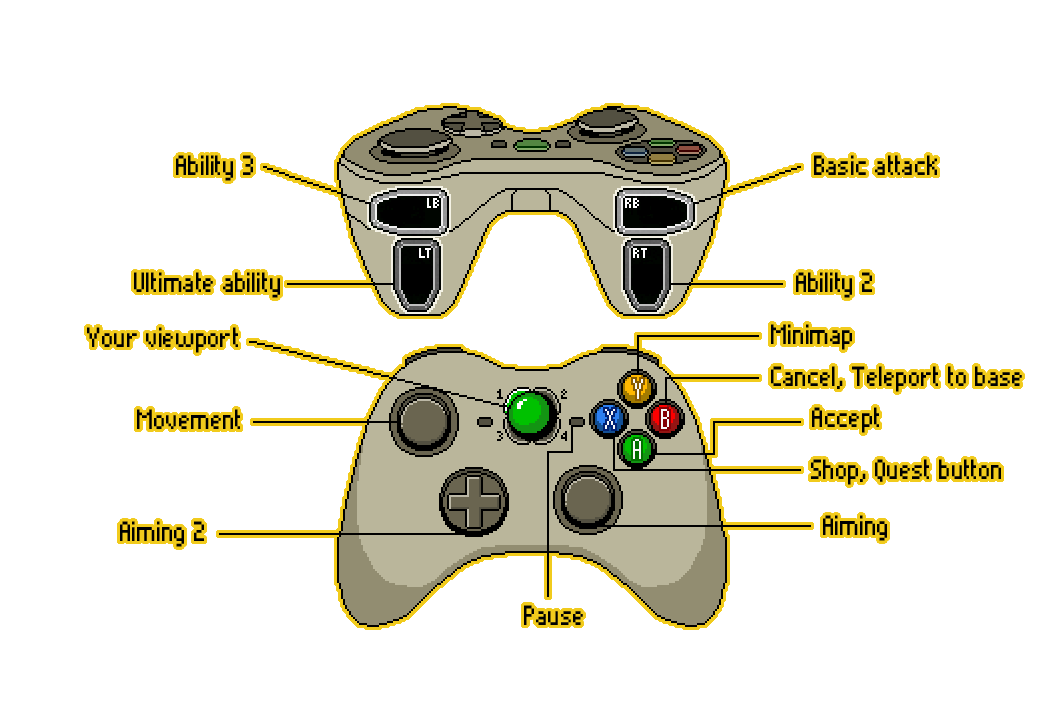
<style>
.page{position:relative;width:1063px;height:710px;background:#ffffff}
.page>*{position:absolute;margin:0}
.t1{font:36px "Pixelade";color:#000000;scale:0.89 1}
</style>
<div class="page">
<p class="t1" style="left:176px;top:155px;width:77px;height:26px">Ability 3</p>
<p class="t1" style="left:814px;top:155px;width:123px;height:20px">Basic attack</p>
<p class="t1" style="left:134px;top:272px;width:146px;height:26px">Ultimate ability</p>
<p class="t1" style="left:796px;top:272px;width:76px;height:26px">Ability 2</p>
<p class="t1" style="left:87px;top:327px;width:151px;height:26px">Your viewport</p>
<p class="t1" style="left:771px;top:324px;width:81px;height:26px">Minimap</p>
<p class="t1" style="left:771px;top:366px;width:251px;height:26px">Cancel, Teleport to base</p>
<p class="t1" style="left:137px;top:409px;width:103px;height:20px">Movement</p>
<p class="t1" style="left:812px;top:407px;width:67px;height:26px">Accept</p>
<p class="t1" style="left:811px;top:459px;width:190px;height:26px">Shop, Quest button</p>
<p class="t1" style="left:120px;top:521px;width:84px;height:26px">Aiming 2</p>
<p class="t1" style="left:823px;top:515px;width:64px;height:26px">Aiming</p>
<p class="t1" style="left:524px;top:605px;width:59px;height:20px">Pause</p>
</div>
